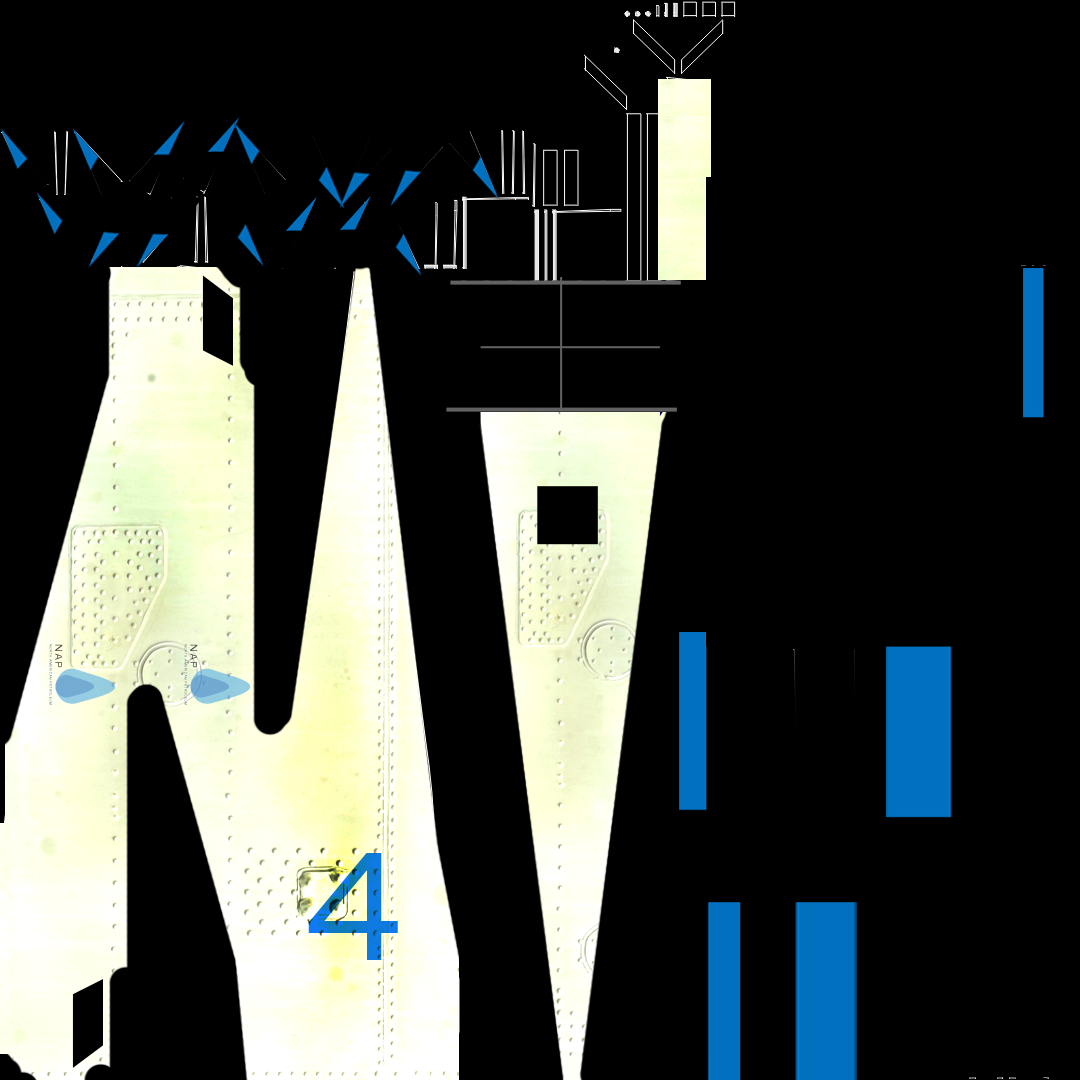
<style>
.page{position:relative;width:1080px;height:1080px;background:#000000}
.page>*{position:absolute;margin:0}
.t1{font:146.6px "Moire";letter-spacing:0.24em}
</style>
<div class="page">
<p class="t1" style="left:308px;top:853px;width:90px;height:107px">4</p>
</div>
